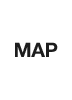
<style>
.page{position:relative;width:72px;height:100px;background:#ffffff}
.page>*{position:absolute;margin:0}
.t1{font:20px "Helvetica75-Bold";letter-spacing:-0.02em;color:#1d1d1d;text-transform:uppercase}
</style>
<div class="page">
<p class="t1" style="left:15px;top:42px;width:43px;height:15px">map</p>
</div>
